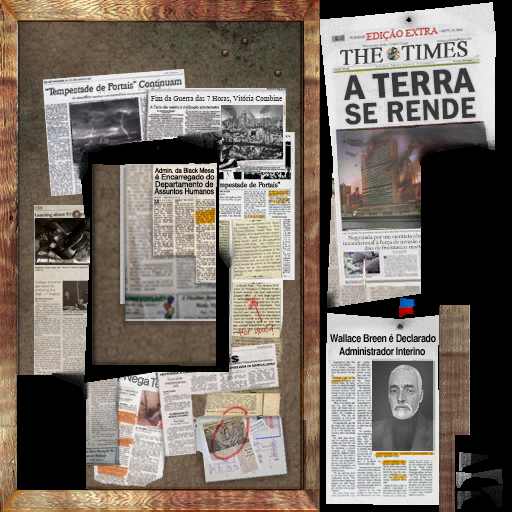
<style>
.page{position:relative;width:512px;height:512px}
.page>*{position:absolute;margin:0}
.t1{font:36px "FranklinGothic-DemiCnd";letter-spacing:0.02em;color:#393839;scale:1.09 1}
.t2{font:12.4px "AngsanaNew";letter-spacing:-0.01em;color:#393839;scale:0.92 1}
.t3{font:30.6px "FranklinITC-Bold";letter-spacing:0.02em;color:#393839;scale:0.91 1}
.t4{font:6.2px "AngsanaNew";letter-spacing:-0.01em;color:#494849;scale:0.93 1}
.t5{font:7.5px "Helvetica";letter-spacing:-0.01em;color:#000000}
.t6{font:6.7px "Helvetica";letter-spacing:-0.01em;color:#000000;scale:0.9 1}
.t7{font:8.3px "Helvetica";letter-spacing:-0.003em;color:#000000;scale:0.92 1}
.t8{font:8.2px "Helvetica";letter-spacing:-0.01em;color:#000000;scale:0.85 1}
.t9{font:9.9px "InkFree";letter-spacing:-0.03em;color:#ad4539;font-weight:bold}
.t10{font:10.7px "Helvetica-Narrow-Bold";letter-spacing:-0.03em;color:#000000}
</style>
<div class="page">
<p class="t1" style="left:344px;top:68px;width:132px;height:33px;rotate:-4deg">A TERRA</p>
<p class="t2" style="left:151px;top:95px;width:132px;height:8px">Fim da Guerra das 7 Horas, Vitória Combine</p>
<p class="t3" style="left:345px;top:97px;width:131px;height:28px;rotate:-3deg">SE RENDE</p>
<p class="t4" style="left:150px;top:105px;width:69px;height:5px">A Terra não resistiu à civilização extraterrestre</p>
<p class="t5" style="left:155px;top:173px;width:60px;height:9px">é Encarregado do</p>
<p class="t6" style="left:155px;top:167px;width:59px;height:6px">Admin. da Black Mesa</p>
<p class="t7" style="left:155px;top:181px;width:59px;height:8px">Departamento de</p>
<p class="t8" style="left:154px;top:188px;width:60px;height:7px">Assuntos Humanos</p>
<p class="t9" style="left:237px;top:325px;width:32px;height:11px;rotate:-8deg">Por quê</p>
<p class="t10" style="left:330px;top:334px;width:106px;height:9px">Wallace Breen é Declarado</p>
<p class="t10" style="left:339px;top:347px;width:86px;height:9px">Administrador Interino</p>
</div>
